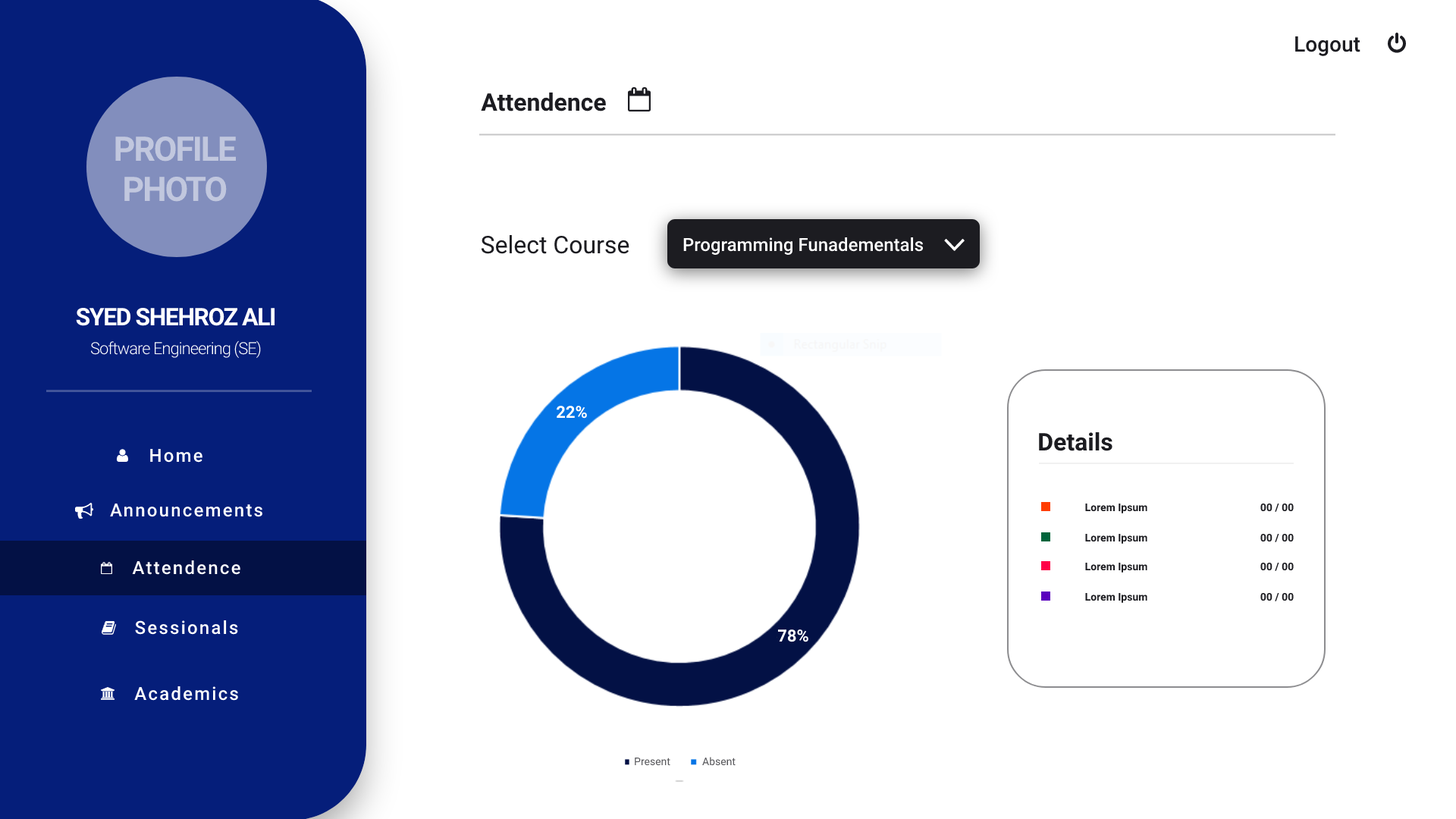
<style>
.page{position:relative;width:1456px;height:819px;background:#ffffff}
.page>*{position:absolute;margin:0}
.t1{font:21.2px "Roboto-Medium";color:#1c1c21}
.t2{font:24.3px "Roboto-Bold";color:#1c1c21}
.t3{font:33.8px "Roboto-Bold";letter-spacing:-0.046em;color:#c1c7de}
.t4{font:24.3px "Roboto-Regular";color:#1c1c21}
.t5{font:18.2px "Roboto-Medium";color:#ffffff}
.t6{font:24.3px "Roboto-Bold";letter-spacing:-0.046em;color:#ffffff}
.t7{font:16.7px "Roboto-Light";letter-spacing:-0.046em;color:#ffffff}
.t8{font:16.7px "Roboto-Bold";color:#ffffff}
.t9{font:18.2px "Roboto-Medium";letter-spacing:0.092em;color:#ffffff}
.t10{font:10.6px "Roboto-Bold";color:#1c1c21}
.t11{font:10.6px "Roboto-Regular";color:#555559}
</style>
<div class="page">
<p class="t1" style="left:1295px;top:36px;width:65px;height:20px">Logout</p>
<p class="t2" style="left:481px;top:93px;width:125px;height:18px">Attendence</p>
<p class="t3" style="left:115px;top:136px;width:121px;height:66px;text-align:center">PROFILE<br>PHOTO</p>
<p class="t4" style="left:481px;top:235px;width:148px;height:19px">Select Course</p>
<p class="t5" style="left:683px;top:237px;width:241px;height:18px">Programming Funadementals</p>
<p class="t6" style="left:76px;top:307px;width:199px;height:19px">SYED SHEHROZ ALI</p>
<p class="t7" style="left:90px;top:340px;width:171px;height:19px">Software Engineering (SE)</p>
<p class="t8" style="left:557px;top:406px;width:30px;height:13px">22%</p>
<p class="t2" style="left:1039px;top:432px;width:73px;height:19px">Details</p>
<p class="t9" style="left:150px;top:448px;width:52px;height:15px">Home</p>
<p class="t9" style="left:110px;top:503px;width:152px;height:14px">Announcements</p>
<p class="t10" style="left:1085px;top:504px;width:62px;height:9px">Lorem Ipsum</p>
<p class="t10" style="left:1260px;top:503px;width:34px;height:9px">00 / 00</p>
<p class="t10" style="left:1085px;top:534px;width:62px;height:10px">Lorem Ipsum</p>
<p class="t10" style="left:1260px;top:533px;width:34px;height:9px">00 / 00</p>
<p class="t9" style="left:132px;top:560px;width:108px;height:15px">Attendence</p>
<p class="t10" style="left:1085px;top:563px;width:62px;height:10px">Lorem Ipsum</p>
<p class="t10" style="left:1260px;top:562px;width:34px;height:9px">00 / 00</p>
<p class="t10" style="left:1085px;top:593px;width:62px;height:10px">Lorem Ipsum</p>
<p class="t10" style="left:1260px;top:592px;width:34px;height:9px">00 / 00</p>
<p class="t9" style="left:135px;top:620px;width:103px;height:15px">Sessionals</p>
<p class="t8" style="left:777px;top:629px;width:31px;height:13px">78%</p>
<p class="t9" style="left:134px;top:686px;width:104px;height:15px">Academics</p>
<p class="t11" style="left:635px;top:758px;width:35px;height:8px">Present</p>
<p class="t11" style="left:702px;top:757px;width:34px;height:9px">Absent</p>
</div>
